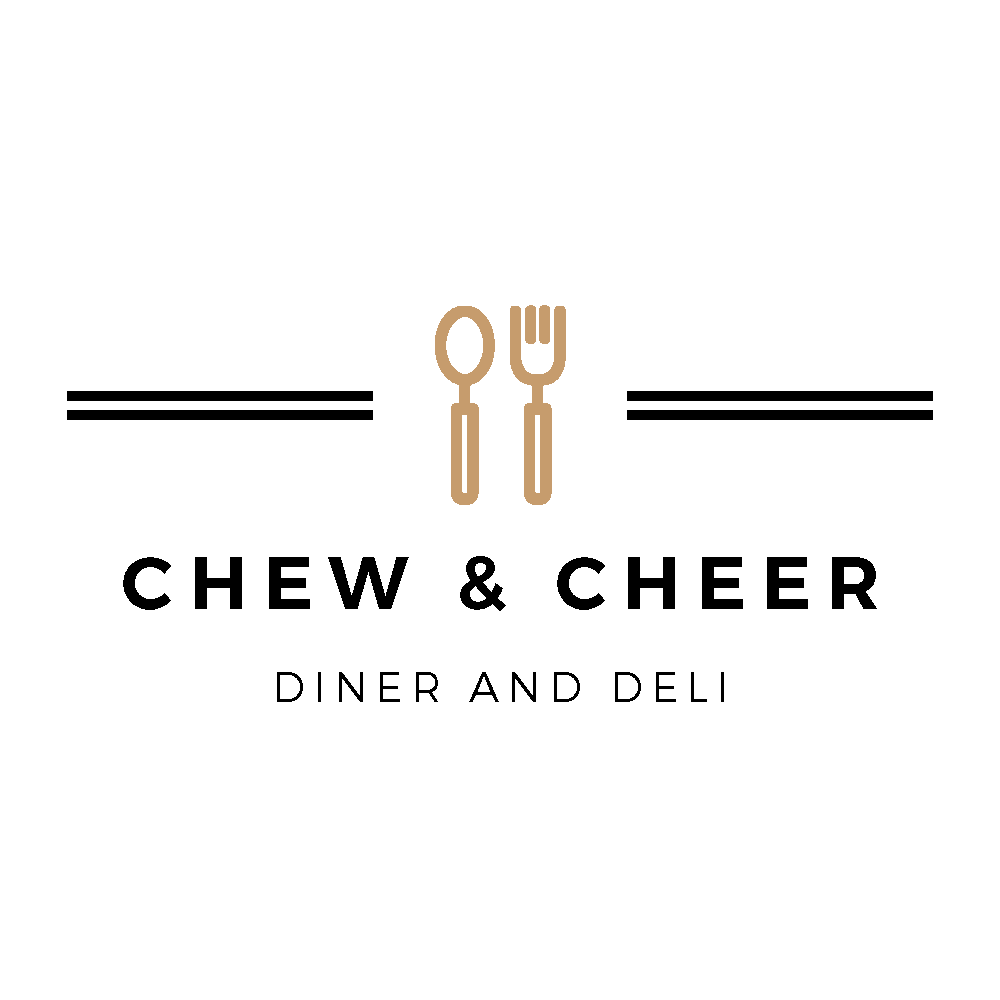
<style>
.page{position:relative;width:1000px;height:1000px;background:#ffffff}
.page>*{position:absolute;margin:0}
.t1{font:75px "Montserrat-SemiBold";letter-spacing:0.2em;color:#000000}
.t2{font:41.7px "Montserrat-Light";letter-spacing:0.2em;color:#000000}
</style>
<div class="page">
<p class="t1" style="left:123px;top:556px;width:754px;height:55px">CHEW &amp; CHEER</p>
<p class="t2" style="left:277px;top:672px;width:447px;height:30px">DINER AND DELI</p>
</div>
